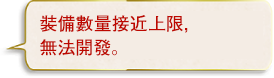
<style>
.page{position:relative;width:274px;height:78px;background:#f4ece4}
.page>*{position:absolute;margin:0}
.t1{font:18px/24px "FutoGoB101Pr5-Bold";color:#bd0800}
</style>
<div class="page">
<p class="t1" style="left:40px;top:15px;width:148px;height:41px">裝備數量接近上限，<br>無法開發。</p>
</div>
